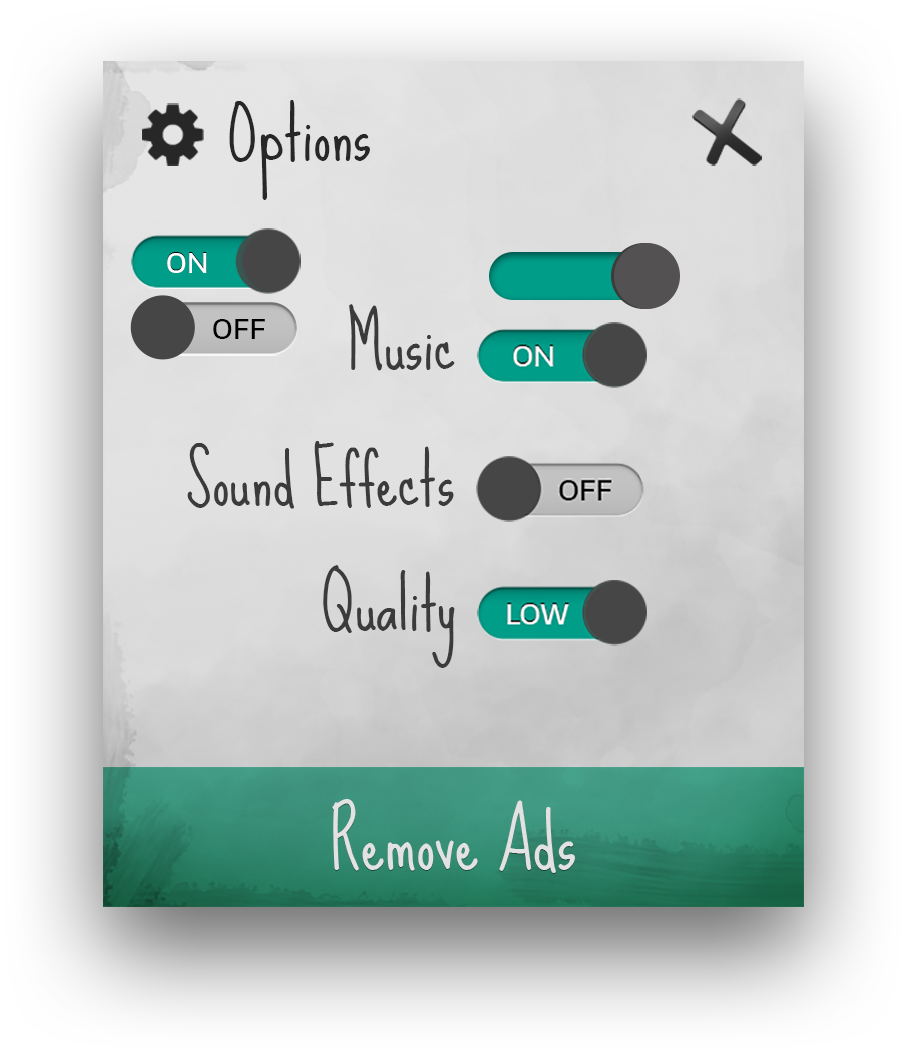
<style>
.page{position:relative;width:909px;height:1054px}
.page>*{position:absolute;margin:0}
.t1{font:71px "SueEllenFrancisco";color:#272727}
.t2{font:27.4px "EncodeSans-Medium";color:#ffffff;text-transform:uppercase}
.t3{font:69.3px "SueEllenFrancisco";color:#3b3b3b}
.t4{font:27.4px "EncodeSans-Medium";color:#000000;text-transform:uppercase}
.t5{font:75px "SueEllenFrancisco";color:#e2e2e2}
</style>
<div class="page">
<p class="t1" style="left:229px;top:100px;width:141px;height:100px">Options</p>
<p class="t2" style="left:167px;top:253px;width:40px;height:20px">ON</p>
<p class="t3" style="left:349px;top:304px;width:106px;height:67px">Music</p>
<p class="t4" style="left:213px;top:319px;width:52px;height:20px">off</p>
<p class="t3" style="left:187px;top:441px;width:267px;height:68px">Sound Effects</p>
<p class="t3" style="left:323px;top:565px;width:132px;height:103px">Quality</p>
<p class="t5" style="left:332px;top:799px;width:243px;height:74px">Remove Ads</p>
</div>
